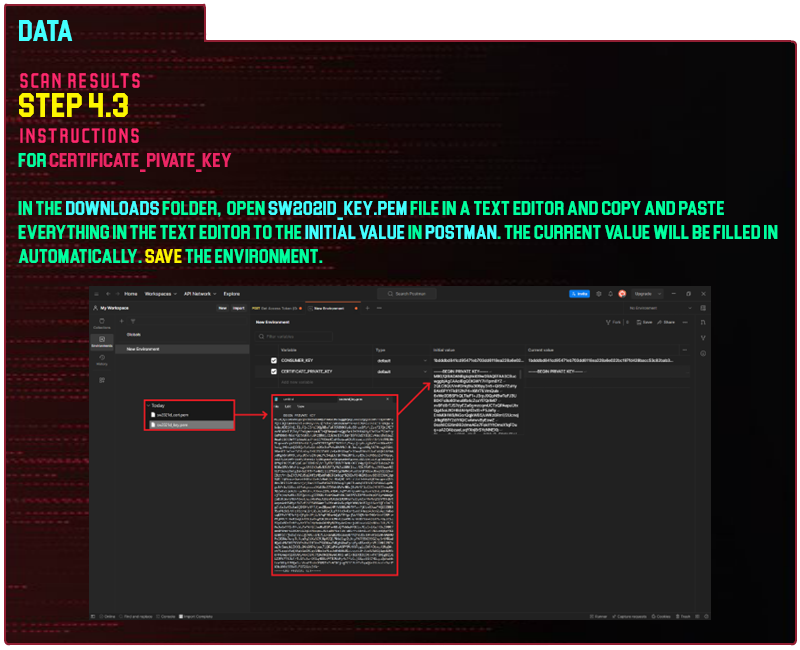
<style>
.page{position:relative;width:800px;height:650px;background:#212121}
.page>*{position:absolute;margin:0}
.t1{font:30px "Blockletter";color:#43ffff}
.t2{font:35px "Party-Lights-[WLM]-Flat";color:#ff296d}
.t3{font:35px "Blockletter";color:#fdf500}
.t4{font:20px "Blockletter";color:#00ff9f}
.t5{font:20px "Blockletter";color:#eb2664}
.t6{font:20px "Blockletter";color:#43ffff}
.t7{font:20px "Blockletter";color:#fdf500}
</style>
<div class="page">
<p class="t1" style="left:19px;top:20px;width:54px;height:21px">Data</p>
<p class="t2" style="left:20px;top:73px;width:120px;height:15px">Scan REsults</p>
<p class="t3" style="left:19px;top:93px;width:109px;height:24px">step 4.3</p>
<p class="t2" style="left:20px;top:128px;width:119px;height:15px">instructions</p>
<p class="t4" style="left:18px;top:153px;width:760px;height:110px">for <span class="t5">certificate_pivate_key<br><br></span>in the <span class="t6">downloads </span>folder,  open <span class="t6">sw2021d_key.pem</span> file in a text editor and copy and paste everything in the text editor to the<span class="t6"> initial value</span> in <span class="t6">postman</span>. the current value will be filled in automatically.<span class="t7"> save </span>the environment.</p>
</div>
